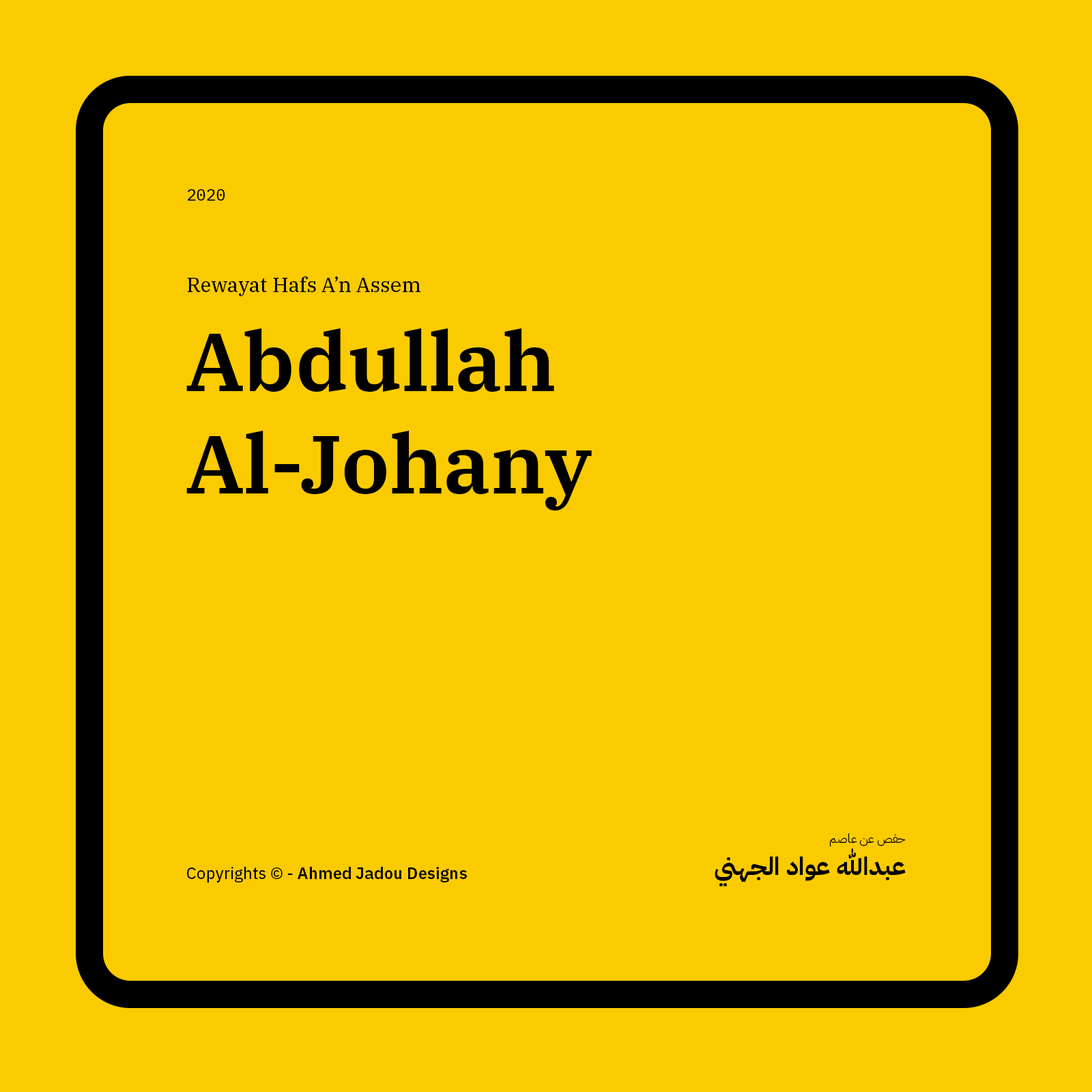
<style>
.page{position:relative;width:1092px;height:1092px;background:#facb00}
.page>*{position:absolute;margin:0}
.t1{font:16.4px "IBMPlexMono-Text";color:#000000}
.t2{font:20.5px "IBMPlexSerif-Text";color:#000000}
.t3{font:81.9px/102.7px "IBMPlexSerif-SemiBold";color:#000000}
.t4{font:12.3px "IBMPlexArabic-Light";color:#000000}
.t5{font:24.6px "IBMPlexArabic-Bold";color:#000000}
.t6{font:16.4px "IBMPlexSans-SemiBold";color:#000000}
.t7{font:16.4px "IBMPlexSans-Text";color:#000000}
</style>
<div class="page">
<p class="t1" style="left:188px;top:189px;width:37px;height:12px">2020</p>
<p class="t2" style="left:187px;top:276px;width:233px;height:20px">Rewayat Hafs A’n Assem</p>
<p class="t3" style="left:186px;top:328px;width:406px;height:183px">Abdullah Al-Johany</p>
<p class="t4" style="left:830px;top:833px;width:76px;height:14px">حفص عن عاصم</p>
<p class="t5" style="left:715px;top:848px;width:191px;height:39px">عبدالله عواد الجهني</p>
<p class="t6" style="left:187px;top:867px;width:280px;height:15px"><span class="t7">Copyrights © - </span>Ahmed Jadou Designs</p>
</div>
